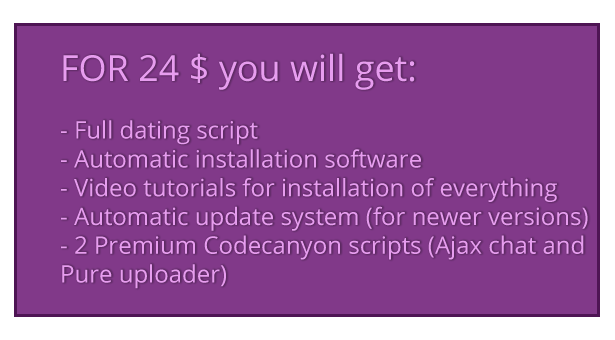
<style>
.page{position:relative;width:615px;height:340px;background:#813989}
.page>*{position:absolute;margin:0}
.t1{font:24px "OpenSans";color:#e79def}
.t2{font:36px "OpenSans";color:#e79def}
</style>
<div class="page">
<p class="t1" style="left:61px;top:53px;width:527px;height:236px"><span class="t2">FOR 24 $ you will get:<br></span><br>- Full dating script <br>- Automatic installation software<br>- Video tutorials for installation of everything<br>- Automatic update system (for newer versions)<br>- 2 Premium Codecanyon scripts (Ajax chat and<br>Pure uploader)</p>
</div>
